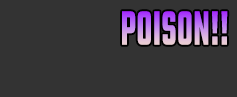
<style>
.page{position:relative;width:237px;height:97px;background:#333333}
.page>*{position:absolute;margin:0}
.t1{font:51.9px "Teko-Semibold";font-weight:bold;scale:0.64 1}
</style>
<div class="page">
<p class="t1" style="left:122px;top:11px;width:106px;height:34px">POISON!!</p>
</div>
